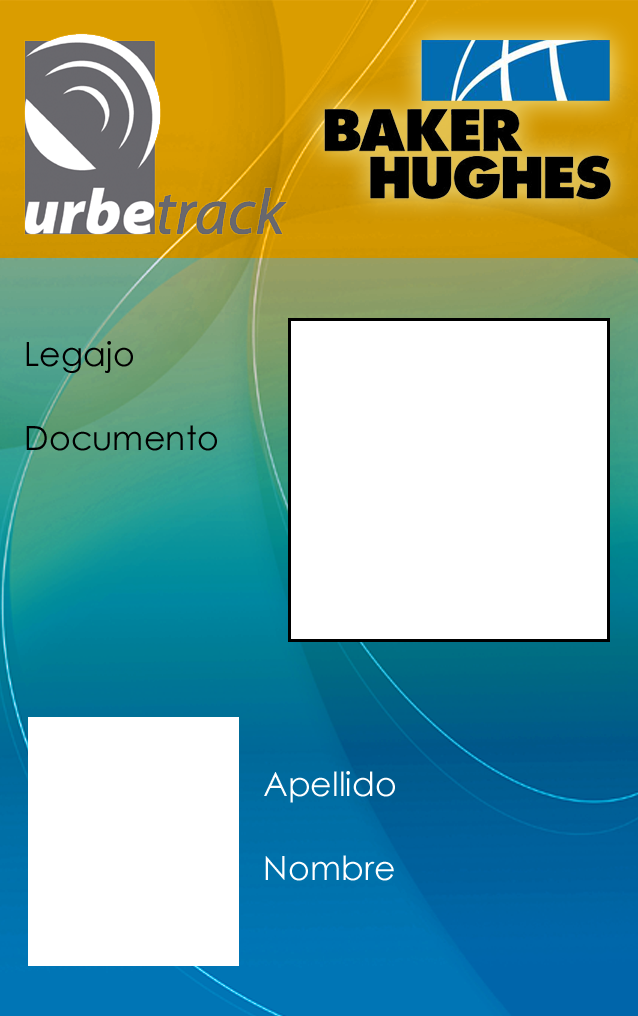
<style>
.page{position:relative;width:638px;height:1016px;background:#ffffff}
.page>*{position:absolute;margin:0}
.t1{font:33.3px/41.7px "CenturyGothic";color:#000000}
.t2{font:33.3px/41.7px "CenturyGothic";color:#ffffff}
</style>
<div class="page">
<p class="t1" style="left:26px;top:341px;width:191px;height:110px">Legajo<br><br>Documento</p>
<p class="t2" style="left:264px;top:771px;width:131px;height:110px">Apellido<br><br>Nombre</p>
</div>
